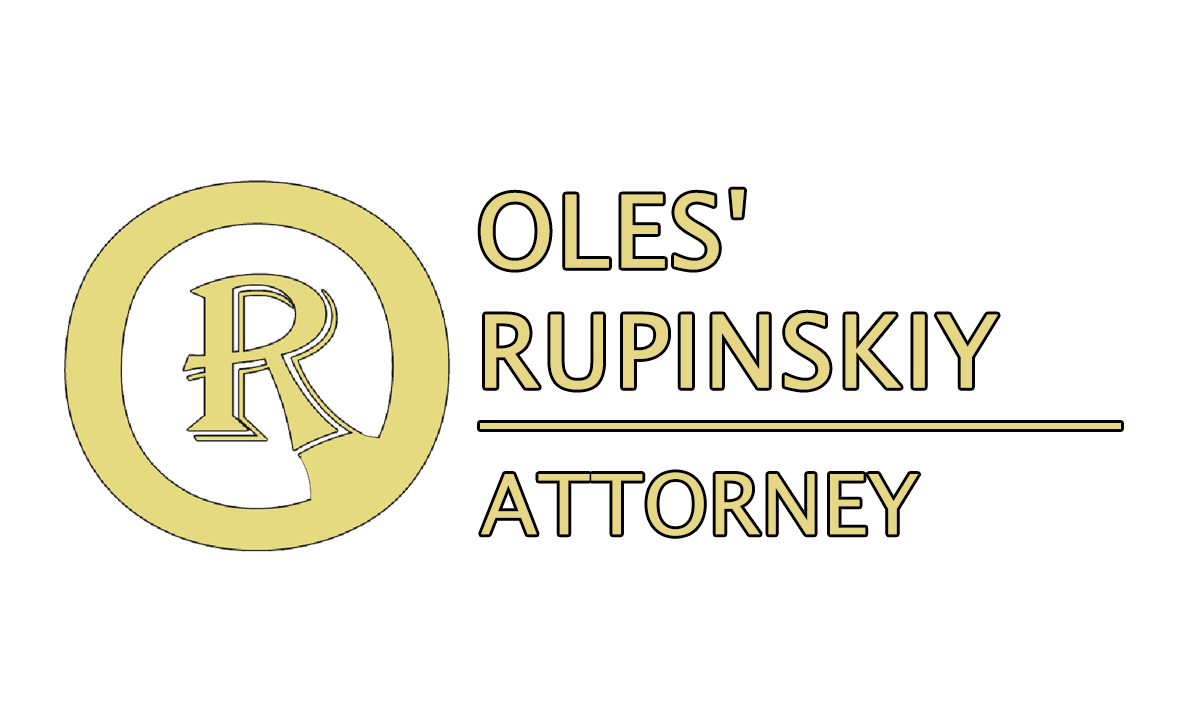
<style>
.page{position:relative;width:1202px;height:720px;background:#ffffff}
.page>*{position:absolute;margin:0}
.t1{font:100px "LucidaSans";color:#e6d786;font-weight:bold}
</style>
<div class="page">
<p class="t1" style="left:480px;top:189px;width:518px;height:201px">OLES' <br>RUPINSKIY</p>
</div>
